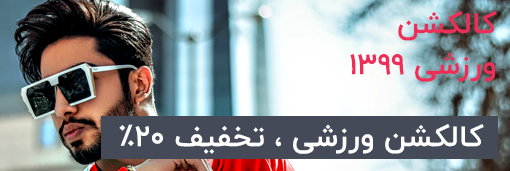
<style>
.page{position:relative;width:510px;height:171px}
.page>*{position:absolute;margin:0}
.t1{font:30px/41px "IRANYekan-Bold";color:#ed2e59}
.t2{font:30px "IRANYekan-Bold";color:#ffffff}
</style>
<div class="page">
<p class="t1" style="left:350px;top:11px;width:147px;height:71px;text-align:right">کالکشن<br> ورزشی 1399</p>
<p class="t2" style="left:119px;top:124px;width:365px;height:30px">کالکشن ورزشی ، تخفیف 20%</p>
</div>
